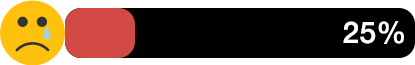
<style>
.page{position:relative;width:415px;height:65px;background:#000000}
.page>*{position:absolute;margin:0}
.t1{font:30px "HelveticaNeueCyr-Medium";color:#ffffff}
</style>
<div class="page">
<p class="t1" style="left:343px;top:21px;width:61px;height:23px">25%</p>
</div>
